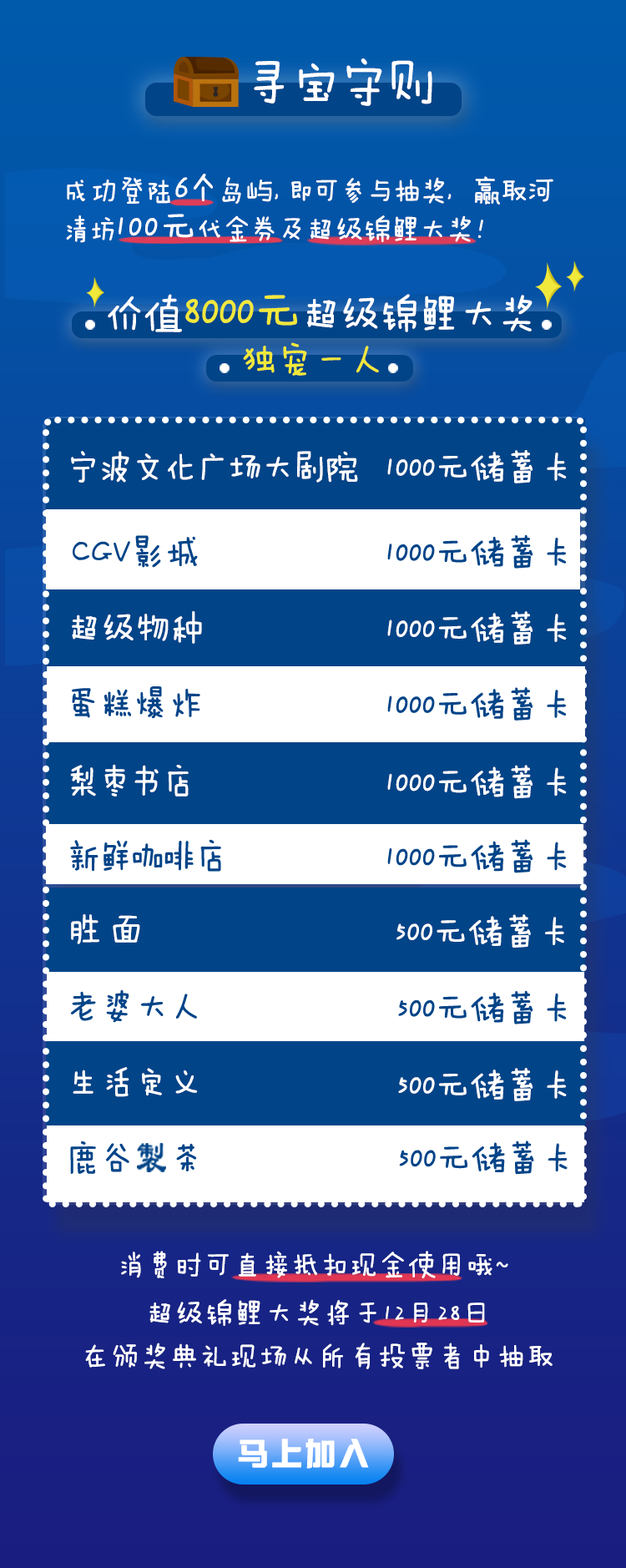
<style>
.page{position:relative;width:626px;height:1568px;background:#024488}
.page>*{position:absolute;margin:0}
.t1{font:51.8px "FZMWJW--GB1-0";letter-spacing:-0.08em;color:#ffffff}
.t2{font:28.5px/1.7px "FZMWJW--GB1-0";letter-spacing:-0.06em;color:#ffffff}
.t3{font:28.5px/1.7px "FZMWJW--GB1-0";letter-spacing:-0.02em;color:#ffffff}
.t4{font:37.1px/1.7px "FZMWJW--GB1-0";letter-spacing:-0.12em;color:#ffffff}
.t5{font:28.5px/1.7px "FZMWJW--GB1-0";letter-spacing:-0.58em;color:#ffffff}
.t6{font:37.1px/38.4px "FZMWJW--GB1-0";letter-spacing:0.04em;color:#ffffff}
.t7{font:37.1px/38.4px "FZMWJW--GB1-0";letter-spacing:-0.04em;color:#ffffff}
.t8{font:28.5px/38.4px "FZMWJW--GB1-0";letter-spacing:-0.04em;color:#ffffff}
.t9{font:28.5px/38.4px "FZMWJW--GB1-0";color:#ffffff}
.t10{font:28.5px/38.4px "FZMWJW--GB1-0";letter-spacing:0.02em;color:#ffffff}
.t11{font:28.5px/38.4px "FZMWJW--GB1-0";letter-spacing:-0.02em;color:#ffffff}
.t12{font:28.5px/35px "FZMWJW--GB1-0";letter-spacing:-0.04em;color:#ffffff}
.t13{font:40.4px "FZMWJW--GB1-0";letter-spacing:-0.02em;color:#ffffff}
.t14{font:48.7px "FZMWJW--GB1-0";letter-spacing:-0.02em;color:#f0e83b}
.t15{font:37px "FZMWJW--GB1-0";letter-spacing:-0.02em;color:#f0e83b}
.t16{font:34.4px "FZMWJW--GB1-0";letter-spacing:-0.06em;color:#ffffff}
.t17{font:34.6px "FZMWJW--GB1-0";color:#ffffff}
.t18{font:34.4px "FZMWJW--GB1-0";color:#024488}
.t19{font:34.6px "FZMWJW--GB1-0";color:#024488}
.t20{font:34.4px "FZMWJW--GB1-0";color:#ffffff}
.t21{font:34.4px "FZMWJW--GB1-0";letter-spacing:-0.08em;color:#ffffff}
.t22{font:34.4px "FZMWJW--GB1-0";letter-spacing:-0.08em;color:#024488}
.t23{font:28.5px "FZMWJW--GB1-0";letter-spacing:0.02em;color:#ffffff}
.t24{font:28.5px/43.4px "FZMWJW--GB1-0";letter-spacing:0.04em;color:#ffffff}
.t25{font:31.2px "Tensentype-LingHeiJ";letter-spacing:0.08em;color:#ffffff}
</style>
<div class="page">
<p class="t1" style="left:254px;top:58px;width:178px;height:48px">寻宝守则</p>
<p class="t2" style="left:66px;top:174px;width:488px;height:69px"><span class="t3">成功登陆</span><span class="t4">6个</span><span class="t3">岛屿</span><span class="t5">，</span>即可参与抽奖，赢取河清坊<span class="t6">100</span><span class="t7">元</span><span class="t8">代金券</span><span class="t9">及</span><span class="t10">超</span><span class="t11">级</span><span class="t3">锦</span><span class="t12">鲤大奖！</span></p>
<p class="t13" style="left:108px;top:294px;width:425px;height:38px">价值<span class="t14">8000元</span>超级锦鲤大奖</p>
<p class="t15" style="left:243px;top:342px;width:136px;height:34px">独宠一人</p>
<p class="t16" style="left:71px;top:451px;width:287px;height:32px">宁波文化广场大剧院</p>
<p class="t17" style="left:387px;top:450px;width:180px;height:33px">1000元储蓄卡</p>
<p class="t18" style="left:73px;top:535px;width:125px;height:33px">CGV影城</p>
<p class="t19" style="left:387px;top:534px;width:180px;height:35px">1000元储蓄卡</p>
<p class="t20" style="left:72px;top:610px;width:130px;height:34px">超级物种</p>
<p class="t17" style="left:387px;top:611px;width:180px;height:34px">1000元储蓄卡</p>
<p class="t18" style="left:72px;top:686px;width:128px;height:33px">蛋糕爆炸</p>
<p class="t19" style="left:387px;top:687px;width:180px;height:34px">1000元储蓄卡</p>
<p class="t21" style="left:70px;top:764px;width:119px;height:33px">梨枣书店</p>
<p class="t17" style="left:387px;top:765px;width:180px;height:34px">1000元储蓄卡</p>
<p class="t22" style="left:70px;top:839px;width:151px;height:33px">新鲜咖啡店</p>
<p class="t19" style="left:387px;top:839px;width:180px;height:34px">1000元储蓄卡</p>
<p class="t21" style="left:71px;top:914px;width:69px;height:30px">胜 面</p>
<p class="t17" style="left:397px;top:914px;width:167px;height:34px">500元储蓄卡</p>
<p class="t18" style="left:70px;top:990px;width:127px;height:33px">老婆大人</p>
<p class="t19" style="left:398px;top:990px;width:169px;height:34px">500元储蓄卡</p>
<p class="t20" style="left:73px;top:1067px;width:125px;height:30px">生活定义</p>
<p class="t17" style="left:398px;top:1068px;width:169px;height:33px">500元储蓄卡</p>
<p class="t18" style="left:70px;top:1141px;width:127px;height:33px">鹿谷  茶</p>
<p class="t19" style="left:399px;top:1141px;width:169px;height:34px">500元储蓄卡</p>
<p class="t23" style="left:121px;top:1251px;width:387px;height:27px">消费时可直接抵扣现金使用哦~</p>
<p class="t24" style="left:85px;top:1299px;width:468px;height:70px;text-align:center">超级锦鲤大奖将于12月28日<br>在颁奖典礼现场从所有投票者中抽取</p>
<p class="t25" style="left:238px;top:1439px;width:131px;height:30px">马上加入</p>
</div>
